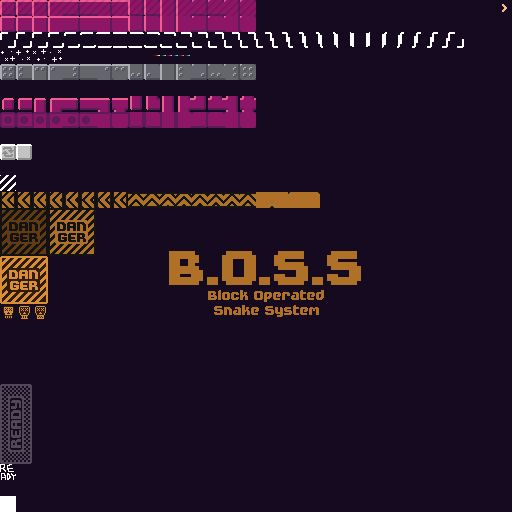
<style>
.page{position:relative;width:512px;height:512px;background:#150a1f}
.page>*{position:absolute;margin:0}
.t1{font:16px/15px "FutilePro";color:#af7128}
.t2{font:60px "FutilePro";color:#af7128}
.t3{font:16px/11px "FutilePro";color:#d98e36}
</style>
<div class="page">
<p class="t1" style="left:169px;top:251px;width:192px;height:66px;text-align:center"><span class="t2">B.O.S.S<br></span>Block Operated<br>Snake System</p>
<p class="t3" style="left:9px;top:270px;width:29px;height:20px;text-align:center">DAN<br>GER</p>
</div>
